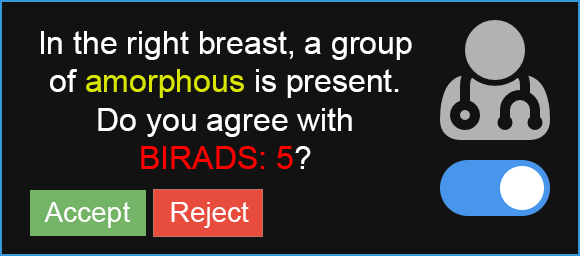
<style>
.page{position:relative;width:580px;height:256px;background:#131212}
.page>*{position:absolute;margin:0}
.t1{font:32px "ArialMT";color:#ffffff}
.t2{font:32px "ArialMT";color:#d8e502}
.t3{font:32px "ArialMT";color:#ff0000}
.t4{font:28px "ArialMT";color:#ffffff}
</style>
<div class="page">
<p class="t1" style="left:41px;top:31px;width:371px;height:138px;text-align:center">In the right breast, a group of <span class="t2">amorphous</span> is present. Do you agree with<br><span class="t3">BIRADS: 5</span>?</p>
<p class="t4" style="left:44px;top:202px;width:86px;height:26px">Accept</p>
<p class="t4" style="left:171px;top:202px;width:78px;height:26px">Reject</p>
</div>
